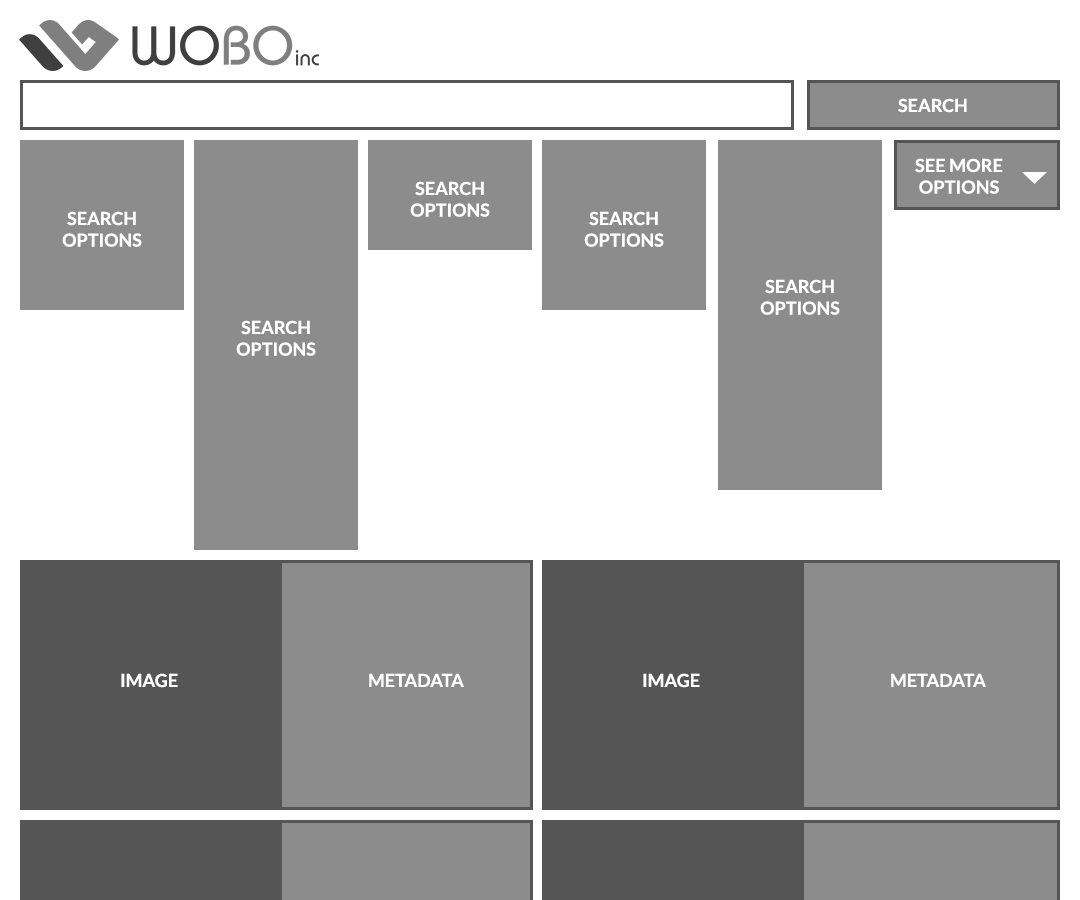
<style>
.page{position:relative;width:1080px;height:900px;background:#ffffff}
.page>*{position:absolute;margin:0}
.t1{font:18px "Lato-Bold";color:#ffffff}
</style>
<div class="page">
<p class="t1" style="left:898px;top:98px;width:69px;height:15px">SEARCH</p>
<p class="t1" style="left:915px;top:158px;width:88px;height:36px;text-align:center">SEE MORE<br>OPTIONS</p>
<p class="t1" style="left:410px;top:181px;width:80px;height:36px;text-align:center">SEARCH<br>OPTIONS</p>
<p class="t1" style="left:62px;top:211px;width:80px;height:36px;text-align:center">SEARCH<br>OPTIONS</p>
<p class="t1" style="left:584px;top:211px;width:80px;height:36px;text-align:center">SEARCH<br>OPTIONS</p>
<p class="t1" style="left:760px;top:279px;width:80px;height:36px;text-align:center">SEARCH<br>OPTIONS</p>
<p class="t1" style="left:236px;top:320px;width:80px;height:36px;text-align:center">SEARCH<br>OPTIONS</p>
<p class="t1" style="left:121px;top:673px;width:57px;height:15px">IMAGE</p>
<p class="t1" style="left:369px;top:673px;width:95px;height:14px">METADATA</p>
<p class="t1" style="left:643px;top:673px;width:57px;height:15px">IMAGE</p>
<p class="t1" style="left:891px;top:673px;width:95px;height:14px">METADATA</p>
</div>
